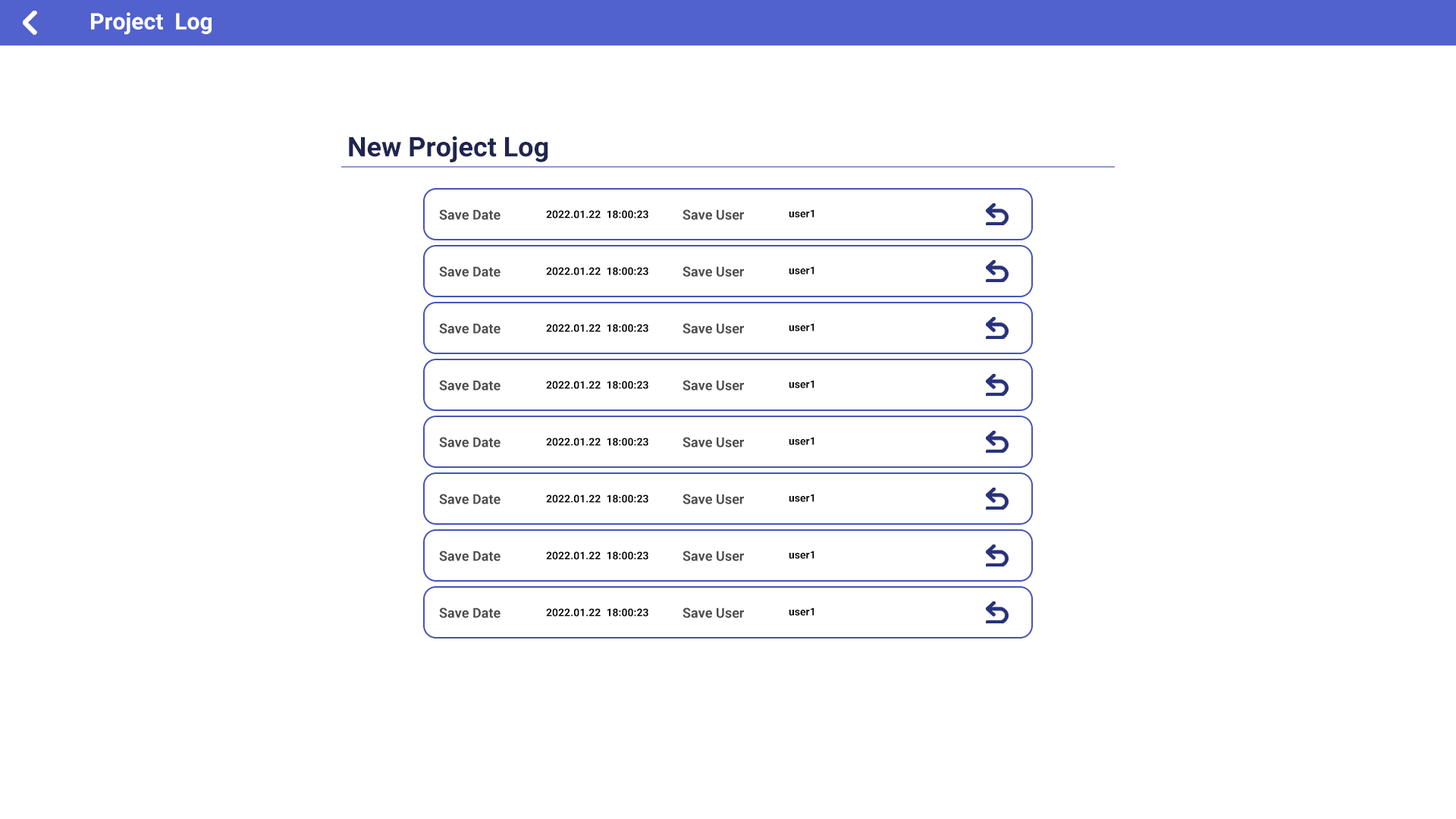
<style>
.page{position:relative;width:1456px;height:819px;background:#ffffff}
.page>*{position:absolute;margin:0}
.t1{font:22.7px "Roboto-Bold";color:#ffffff}
.t2{font:27.3px "Roboto-Bold";color:#1f254f}
.t3{font:13.6px "Roboto-Bold";color:#4d4d4d}
.t4{font:10.6px "Roboto-Bold";color:#000000}
</style>
<div class="page">
<p class="t1" style="left:91px;top:12px;width:121px;height:23px">Project  Log</p>
<p class="t2" style="left:349px;top:136px;width:199px;height:26px">New Project Log</p>
<p class="t3" style="left:439px;top:209px;width:61px;height:11px">Save Date</p>
<p class="t3" style="left:682px;top:209px;width:62px;height:11px">Save User</p>
<p class="t4" style="left:789px;top:209px;width:25px;height:9px">user1</p>
<p class="t4" style="left:546px;top:210px;width:102px;height:8px">2022.01.22  18:00:23</p>
<p class="t3" style="left:439px;top:266px;width:61px;height:11px">Save Date</p>
<p class="t4" style="left:546px;top:267px;width:102px;height:8px">2022.01.22  18:00:23</p>
<p class="t3" style="left:682px;top:266px;width:62px;height:11px">Save User</p>
<p class="t4" style="left:789px;top:266px;width:25px;height:9px">user1</p>
<p class="t3" style="left:439px;top:323px;width:61px;height:11px">Save Date</p>
<p class="t4" style="left:546px;top:324px;width:102px;height:8px">2022.01.22  18:00:23</p>
<p class="t3" style="left:682px;top:323px;width:62px;height:11px">Save User</p>
<p class="t4" style="left:789px;top:323px;width:25px;height:8px">user1</p>
<p class="t3" style="left:439px;top:380px;width:61px;height:11px">Save Date</p>
<p class="t4" style="left:546px;top:381px;width:102px;height:8px">2022.01.22  18:00:23</p>
<p class="t3" style="left:682px;top:380px;width:62px;height:11px">Save User</p>
<p class="t4" style="left:789px;top:380px;width:25px;height:8px">user1</p>
<p class="t3" style="left:439px;top:437px;width:61px;height:10px">Save Date</p>
<p class="t4" style="left:546px;top:438px;width:102px;height:8px">2022.01.22  18:00:23</p>
<p class="t3" style="left:682px;top:437px;width:62px;height:10px">Save User</p>
<p class="t4" style="left:789px;top:437px;width:25px;height:8px">user1</p>
<p class="t3" style="left:439px;top:494px;width:61px;height:10px">Save Date</p>
<p class="t4" style="left:546px;top:494px;width:102px;height:9px">2022.01.22  18:00:23</p>
<p class="t3" style="left:682px;top:494px;width:62px;height:10px">Save User</p>
<p class="t4" style="left:789px;top:494px;width:25px;height:8px">user1</p>
<p class="t3" style="left:439px;top:551px;width:61px;height:10px">Save Date</p>
<p class="t4" style="left:546px;top:551px;width:102px;height:9px">2022.01.22  18:00:23</p>
<p class="t3" style="left:682px;top:551px;width:62px;height:10px">Save User</p>
<p class="t4" style="left:789px;top:551px;width:25px;height:8px">user1</p>
<p class="t3" style="left:439px;top:607px;width:61px;height:11px">Save Date</p>
<p class="t4" style="left:546px;top:608px;width:102px;height:9px">2022.01.22  18:00:23</p>
<p class="t3" style="left:682px;top:607px;width:62px;height:11px">Save User</p>
<p class="t4" style="left:789px;top:607px;width:25px;height:9px">user1</p>
</div>
